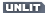
<style>
.page{position:relative;width:48px;height:13px;background:#ffffff}
.page>*{position:absolute;margin:0}
.t1{font:10.5px "BulletproofBB";color:#ffffff;scale:1.15 1}
</style>
<div class="page">
<p class="t1" style="left:6px;top:4px;width:35px;height:7px">UNLit</p>
</div>
